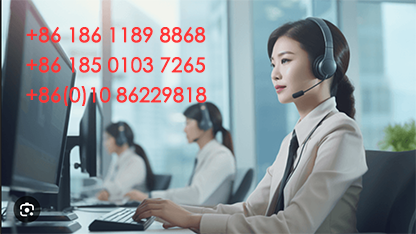
<style>
.page{position:relative;width:416px;height:234px}
.page>*{position:absolute;margin:0}
.t1{font:20px/30px "STXihei";color:#ff3333;font-weight:bold}
.t2{font:20px/30px "STXihei";letter-spacing:-0.014em;color:#ff3333;font-weight:bold}
</style>
<div class="page">
<p class="t1" style="left:26px;top:26px;width:181px;height:80px">+86 186 1189 8868<br>+86 185 0103 7265<br>+86<span class="t2">(0)10 86229818</span></p>
</div>
